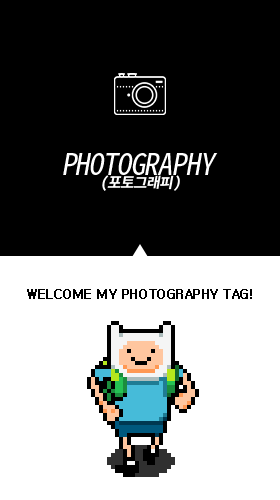
<style>
.page{position:relative;width:280px;height:500px;background:#000000}
.page>*{position:absolute;margin:0}
.t1{font:30px "NotoSansMonoCJKkr-Regular";letter-spacing:-0.04em;color:#ffffff;font-style:italic}
.t2{font:15px "NotoSansMonoCJKkr-Bold";letter-spacing:-0.04em;color:#ffffff;font-style:italic}
.t3{font:12px "Gulim";letter-spacing:-0.04em;color:#000000;font-weight:bold}
</style>
<div class="page">
<p class="t1" style="left:63px;top:153px;width:155px;height:22px">PHOTOGRAPHY</p>
<p class="t2" style="left:102px;top:175px;width:78px;height:16px">(포토그래피)</p>
<p class="t3" style="left:27px;top:289px;width:225px;height:10px">WELCOME MY PHOTOGRAPHY TAG!</p>
</div>
